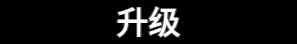
<style>
.page{position:relative;width:297px;height:44px;background:#000000}
.page>*{position:absolute;margin:0}
.t1{font:32px "WebPSD-18463539-0-Regular";color:#ffffff;font-weight:bold}
</style>
<div class="page">
<p class="t1" style="left:0px;top:0px;width:297px;height:44px">升级</p>
</div>
